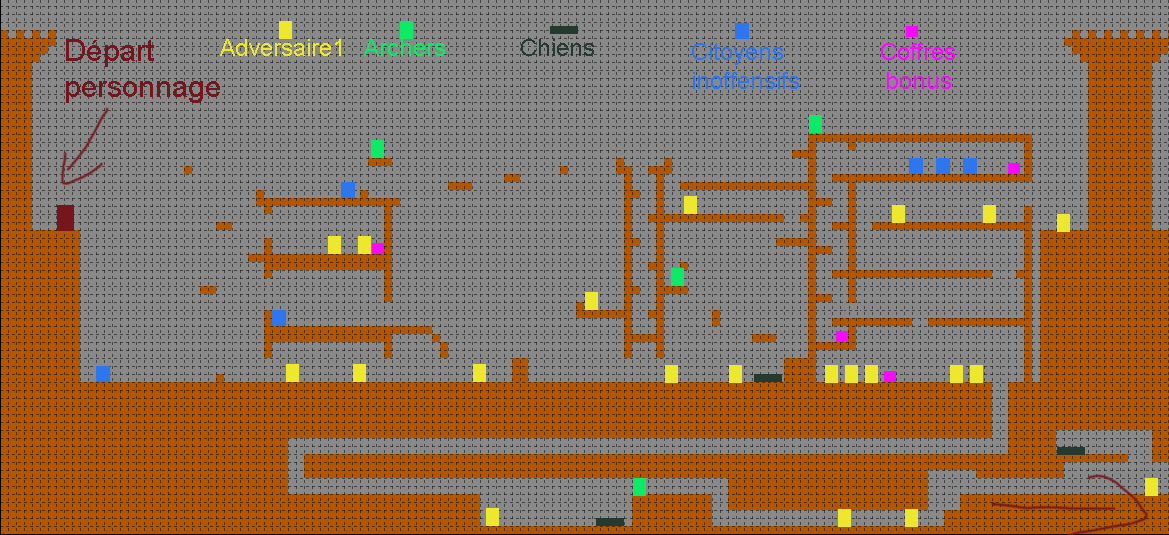
<style>
.page{position:relative;width:1169px;height:535px;background:#898989}
.page>*{position:absolute;margin:0}
.t1{font:30px "ArialMT";color:#75161e}
.t2{font:24px "ArialMT";color:#ede72d}
.t3{font:24px "ArialMT";color:#0deb66}
.t4{font:24px "ArialMT";color:#253a2e}
.t5{font:24px "ArialMT";color:#2d76ed}
.t6{font:24px "ArialMT";color:#f70aff}
</style>
<div class="page">
<p class="t1" style="left:66px;top:39px;width:154px;height:64px">Départ personnage</p>
<p class="t2" style="left:220px;top:39px;width:121px;height:17px">Adversaire1</p>
<p class="t3" style="left:364px;top:39px;width:81px;height:17px">Archers</p>
<p class="t4" style="left:521px;top:39px;width:73px;height:17px">Chiens</p>
<p class="t5" style="left:692px;top:43px;width:107px;height:46px">Citoyens inoffensifs</p>
<p class="t6" style="left:881px;top:43px;width:74px;height:46px;text-align:center">Coffres bonus</p>
</div>
